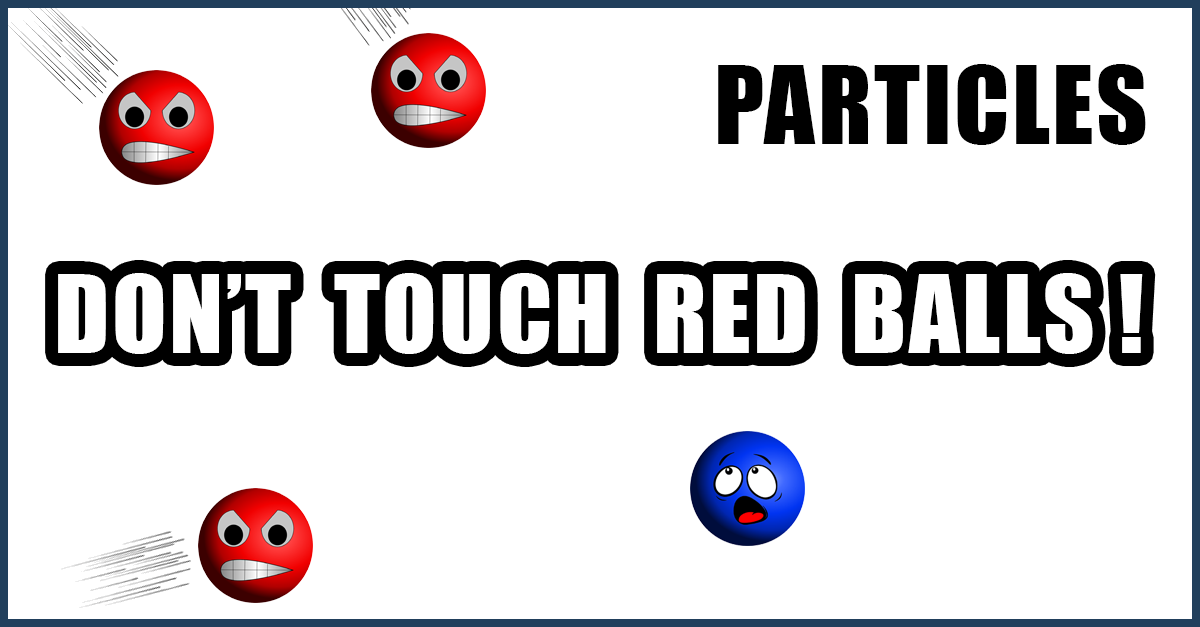
<style>
.page{position:relative;width:1200px;height:627px;background:#ffffff}
.page>*{position:absolute;margin:0}
.t1{font:100px "Impact";letter-spacing:0.025em;color:#000000;text-transform:uppercase}
.t2{font:100px "Impact";letter-spacing:0.025em;color:#ffffff;text-transform:uppercase}
</style>
<div class="page">
<p class="t1" style="left:718px;top:64px;width:428px;height:81px">PARTICLES</p>
<p class="t2" style="left:58px;top:273px;width:1085px;height:81px">DON’t  TOUCH  RED  BALLS !</p>
</div>
